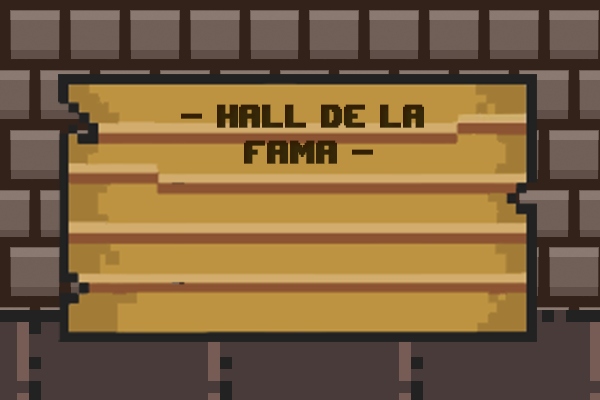
<style>
.page{position:relative;width:600px;height:400px}
.page>*{position:absolute;margin:0}
.t1{font:48px/36px "Upheaval -BRK-";letter-spacing:0.025em;color:#352809;font-weight:bold;scale:0.8 1}
</style>
<div class="page">
<p class="t1" style="left:181px;top:104px;width:243px;height:60px;text-align:center">- Hall de la <br>fama -</p>
</div>
